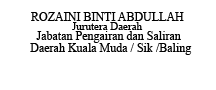
<style>
.page{position:relative;width:216px;height:90px;background:#ffffff}
.page>*{position:absolute;margin:0}
.t1{font:12px "TimesNewRomanPSMT";color:#000000}
.t2{font:11px "TimesNewRomanPSMT";color:#000000}
</style>
<div class="page">
<p class="t1" style="left:31px;top:12px;width:153px;height:9px">ROZAINI BINTI ABDULLAH</p>
<p class="t2" style="left:72px;top:22px;width:71px;height:8px">Jurutera Daerah</p>
<p class="t1" style="left:36px;top:31px;width:145px;height:12px">Jabatan Pengairan dan Saliran</p>
<p class="t1" style="left:30px;top:43px;width:162px;height:12px">Daerah Kuala Muda / Sik /Baling</p>
</div>
